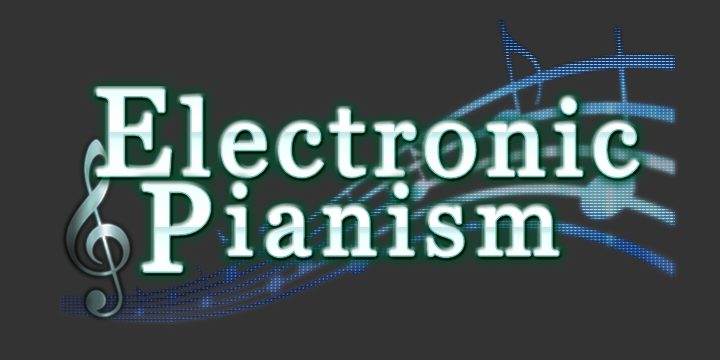
<style>
.page{position:relative;width:720px;height:360px;background:#333333}
.page>*{position:absolute;margin:0}
.t1{font:102px "Vani";letter-spacing:0.05em;color:#ffffff;font-weight:bold}
.t2{font:122px "Vani";letter-spacing:0.05em;color:#ffffff;font-weight:bold}
.t3{font:162px "Vani";letter-spacing:0.08em;color:#ffffff;font-weight:bold}
.t4{font:210px "Vani";letter-spacing:0.08em;color:#ffffff;font-weight:bold}
</style>
<div class="page">
<p class="t1" style="left:97px;top:90px;width:542px;height:88px"><span class="t2">E</span>lectronic</p>
<p class="t3" style="left:143px;top:184px;width:416px;height:88px"><span class="t4">P</span>ianism</p>
</div>
